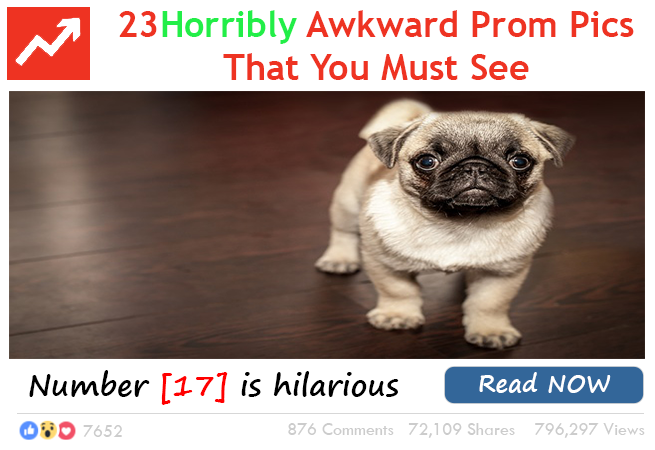
<style>
.page{position:relative;width:655px;height:450px;background:#ffffff}
.page>*{position:absolute;margin:0}
.t1{font:36px "TrebuchetMS-Bold";color:#ee3322}
.t2{font:36px "TrebuchetMS-Bold";color:#22ee48}
.t3{font:30px "SegoePrint-Bold";color:#000000}
.t4{font:30px "SegoePrint-Bold";color:#ff0000}
.t5{font:24px "SegoePrint-Bold";color:#ffffff}
.t6{font:18px "TwCenMT-Regular";color:#cccccc}
</style>
<div class="page">
<p class="t1" style="left:119px;top:10px;width:515px;height:70px;text-align:center">23<span class="t2">Horribly</span> Awkward Prom Pics<br>That You Must See</p>
<p class="t3" style="left:29px;top:370px;width:370px;height:35px">Number <span class="t4">[17]</span> is hilarious</p>
<p class="t5" style="left:479px;top:372px;width:132px;height:21px">Read NOW</p>
<p class="t6" style="left:83px;top:425px;width:39px;height:12px">7652</p>
<p class="t6" style="left:288px;top:423px;width:357px;height:15px">876 Comments   72,109 Shares    796,297 Views</p>
</div>
